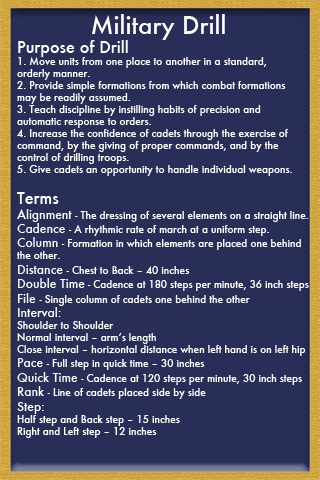
<style>
.page{position:relative;width:320px;height:480px;background:#292e59}
.page>*{position:absolute;margin:0}
.t1{font:24px "Futura-Medium";color:#ffffff}
.t2{font:10px "Futura-Medium";color:#ffffff}
.t3{font:16px "Futura-Medium";color:#ffffff}
.t4{font:12px "Futura-Medium";color:#ffffff}
</style>
<div class="page">
<p class="t1" style="left:92px;top:14px;width:133px;height:26px">Military Drill</p>
<p class="t2" style="left:17px;top:40px;width:292px;height:398px"><span class="t3">Purpose of Drill <br></span>1. Move units from one place to another in a standard, <br>orderly manner.<br>2. Provide simple formations from which combat formations <br>may be readily assumed.<br>3. Teach discipline by instilling habits of precision and <br>automatic response to orders.<br>4. Increase the confidence of cadets through the exercise of <br>command, by the giving of proper commands, and by the <br>control of drilling troops.<br>5. Give cadets an opportunity to handle individual weapons.<br><br><span class="t3">Terms<br></span><span class="t4">Alignment </span>- The dressing of several elements on a straight line.<br><span class="t4">Cadence </span>- A rhythmic rate of march at a uniform step.<br><span class="t4">Column </span>- Formation in which elements are placed one behind <br>the other.<br><span class="t4">Distance </span>- Chest to Back – 40 inches<br><span class="t4">Double Time</span> - Cadence at 180 steps per minute, 36 inch steps<br><span class="t4">File </span>- Single column of cadets one behind the other<br><span class="t4">Interval:<br></span>Shoulder to Shoulder<br>Normal interval – arm’s length<br>Close interval – horizontal distance when left hand is on left hip<br><span class="t4">Pace </span>- Full step in quick time – 30 inches<br><span class="t4">Quick Time </span>- Cadence at 120 steps per minute, 30 inch steps<br><span class="t4">Rank </span>- Line of cadets placed side by side<br><span class="t4">Step:<br></span>Half step and Back step – 15 inches<br>Right and Left step – 12 inches</p>
</div>
